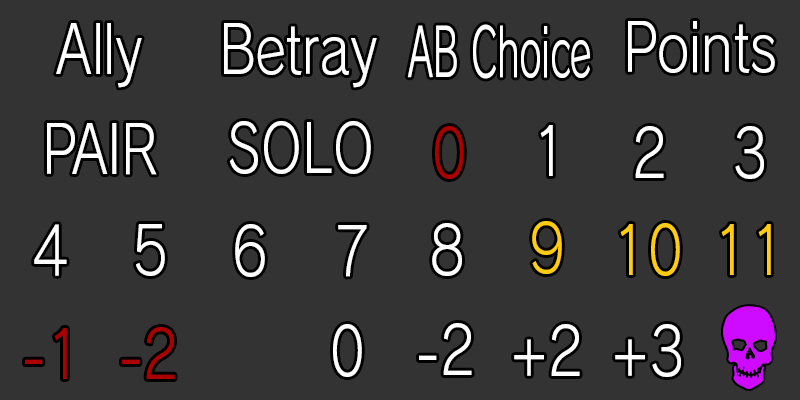
<style>
.page{position:relative;width:800px;height:400px;background:#333333}
.page>*{position:absolute;margin:0}
.t1{font:65.5px "RodinBokutohPro-M";color:#ffffff;scale:0.8 1}
.t2{font:65.5px "RodinBokutohPro-M";color:#ffffff;scale:0.56 1}
.t3{font:65.5px "RodinBokutohPro-M";color:#aa0000;scale:0.8 1}
.t4{font:65.5px "RodinBokutohPro-M";color:#ffcc11;scale:0.8 1}
.t5{font:65.5px "RodinBokutohPro-M";color:#fcfcfc;scale:0.8 1}
</style>
<div class="page">
<p class="t1" style="left:56px;top:23px;width:86px;height:65px">Ally</p>
<p class="t1" style="left:224px;top:23px;width:153px;height:65px">Betray</p>
<p class="t2" style="left:407px;top:24px;width:184px;height:55px">AB Choice</p>
<p class="t1" style="left:628px;top:21px;width:147px;height:52px">Points</p>
<p class="t1" style="left:47px;top:123px;width:110px;height:52px">PAIR</p>
<p class="t1" style="left:229px;top:121px;width:142px;height:53px">SOLO</p>
<p class="t3" style="left:435px;top:126px;width:29px;height:53px">0</p>
<p class="t1" style="left:540px;top:125px;width:13px;height:51px">1</p>
<p class="t1" style="left:635px;top:126px;width:29px;height:52px">2</p>
<p class="t1" style="left:735px;top:126px;width:29px;height:53px">3</p>
<p class="t4" style="left:532px;top:221px;width:30px;height:53px">9</p>
<p class="t1" style="left:34px;top:224px;width:33px;height:52px">4</p>
<p class="t1" style="left:136px;top:224px;width:29px;height:52px">5</p>
<p class="t1" style="left:235px;top:224px;width:30px;height:53px">6</p>
<p class="t1" style="left:338px;top:225px;width:29px;height:52px">7</p>
<p class="t1" style="left:432px;top:223px;width:30px;height:53px">8</p>
<p class="t4" style="left:620px;top:223px;width:60px;height:53px">10</p>
<p class="t4" style="left:721px;top:224px;width:50px;height:51px">11</p>
<p class="t3" style="left:25px;top:328px;width:42px;height:51px">-1</p>
<p class="t3" style="left:122px;top:327px;width:53px;height:52px">-2</p>
<p class="t5" style="left:333px;top:324px;width:29px;height:53px">0</p>
<p class="t1" style="left:419px;top:323px;width:53px;height:52px">-2</p>
<p class="t1" style="left:514px;top:324px;width:66px;height:52px">+2</p>
<p class="t1" style="left:615px;top:324px;width:66px;height:53px">+3</p>
</div>
